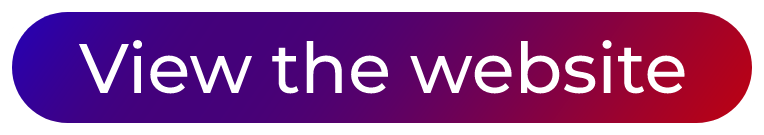
<style>
.page{position:relative;width:764px;height:135px;background:#ffffff}
.page>*{position:absolute;margin:0}
.t1{font:70px "Montserrat-Medium";color:#ffffff}
</style>
<div class="page">
<p class="t1" style="left:78px;top:40px;width:607px;height:54px">View the website</p>
</div>
